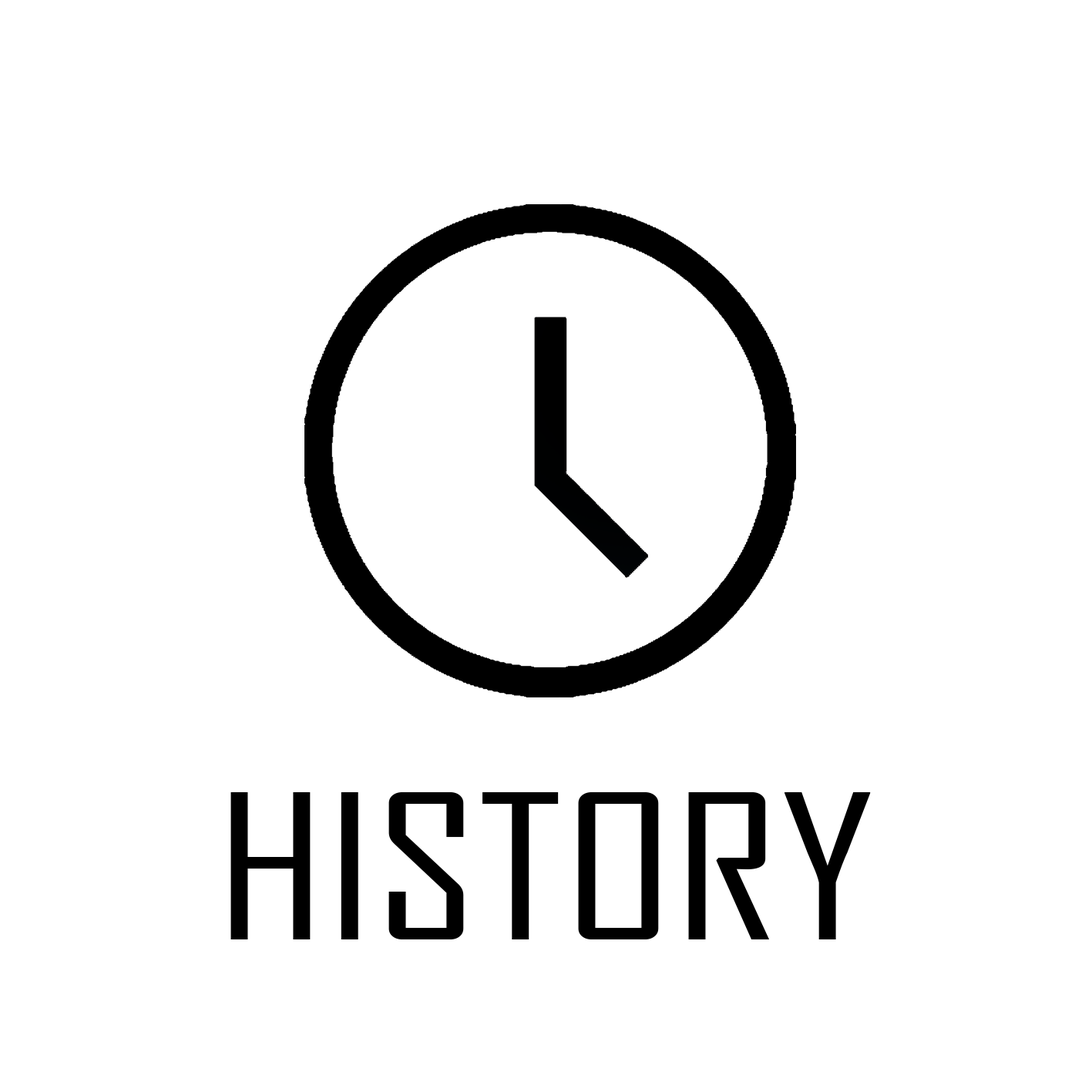
<style>
.page{position:relative;width:1092px;height:1092px;background:#ffffff}
.page>*{position:absolute;margin:0}
.t1{font:192.6px "AgencyFB-Reg";color:#000000;scale:1.29 1}
</style>
<div class="page">
<p class="t1" style="left:230px;top:792px;width:641px;height:147px">HISTORY</p>
</div>
